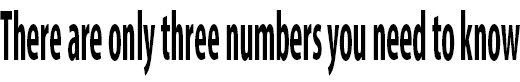
<style>
.page{position:relative;width:520px;height:82px;background:#ffffff}
.page>*{position:absolute;margin:0}
.t1{font:72px "MyriadPro-BoldCond";color:#000000;scale:0.44 1}
</style>
<div class="page">
<p class="t1" style="left:0px;top:10px;width:520px;height:66px">There are only three numbers you need to know</p>
</div>
